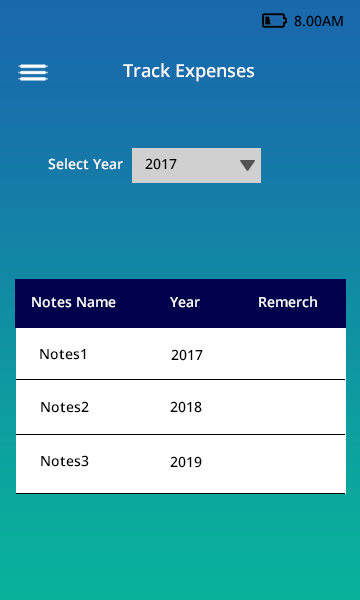
<style>
.page{position:relative;width:360px;height:600px;background:#ffffff}
.page>*{position:absolute;margin:0}
.t1{font:14px "OpenSans-Semibold";color:#000000}
.t2{font:18px "OpenSans-Semibold";color:#ffffff}
.t3{font:14px "OpenSans-Semibold";color:#ffffff}
</style>
<div class="page">
<p class="t1" style="left:294px;top:15px;width:49px;height:12px">8.00AM</p>
<p class="t2" style="left:123px;top:63px;width:131px;height:19px">Track Expenses</p>
<p class="t3" style="left:48px;top:158px;width:75px;height:12px">Select Year</p>
<p class="t1" style="left:145px;top:158px;width:32px;height:12px">2017</p>
<p class="t3" style="left:32px;top:297px;width:84px;height:11px">Notes Name</p>
<p class="t3" style="left:170px;top:297px;width:30px;height:11px">Year</p>
<p class="t3" style="left:259px;top:296px;width:58px;height:12px">Remerch</p>
<p class="t1" style="left:40px;top:349px;width:46px;height:11px">Notes1</p>
<p class="t1" style="left:171px;top:349px;width:32px;height:12px">2017</p>
<p class="t1" style="left:41px;top:401px;width:48px;height:12px">Notes2</p>
<p class="t1" style="left:170px;top:401px;width:32px;height:12px">2018</p>
<p class="t1" style="left:41px;top:455px;width:48px;height:12px">Notes3</p>
<p class="t1" style="left:170px;top:456px;width:32px;height:12px">2019</p>
</div>
